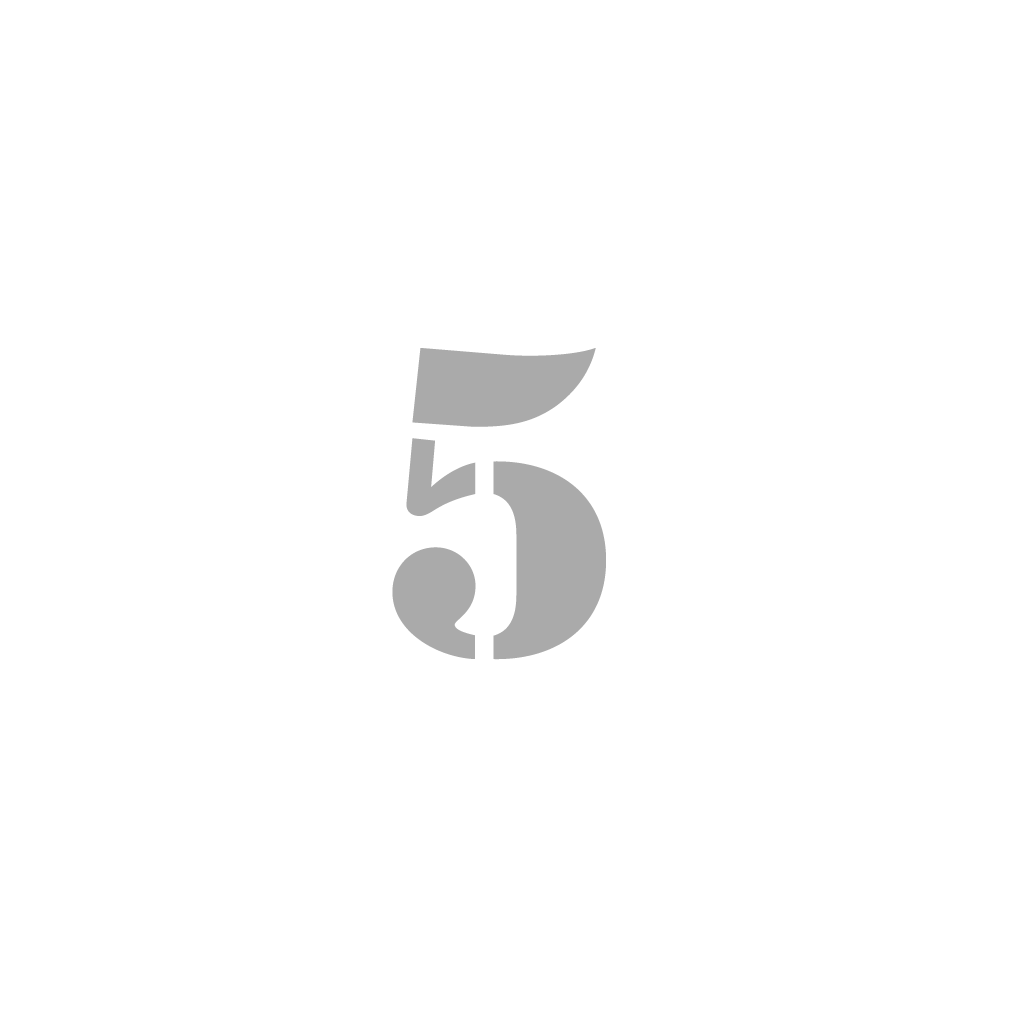
<style>
.page{position:relative;width:1024px;height:1024px;background:#ffffff}
.page>*{position:absolute;margin:0}
.t1{font:400px "StencilStd";color:#aaaaaa}
</style>
<div class="page">
<p class="t1" style="left:392px;top:348px;width:214px;height:312px">5</p>
</div>
